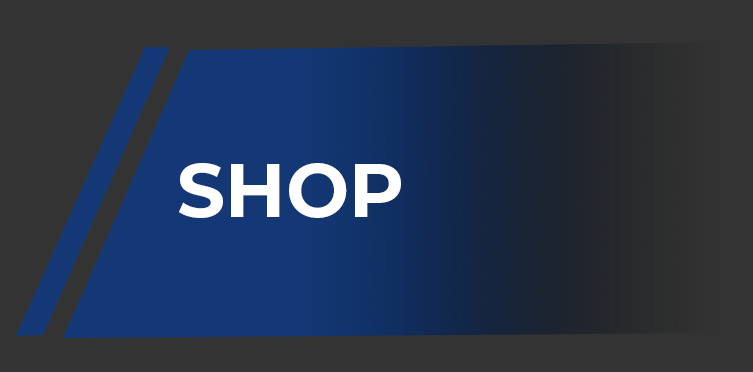
<style>
.page{position:relative;width:753px;height:372px;background:#333333}
.page>*{position:absolute;margin:0}
.t1{font:75px "Montserrat-Bold";color:#ffffff}
</style>
<div class="page">
<p class="t1" style="left:179px;top:163px;width:222px;height:55px">SHOP</p>
</div>
